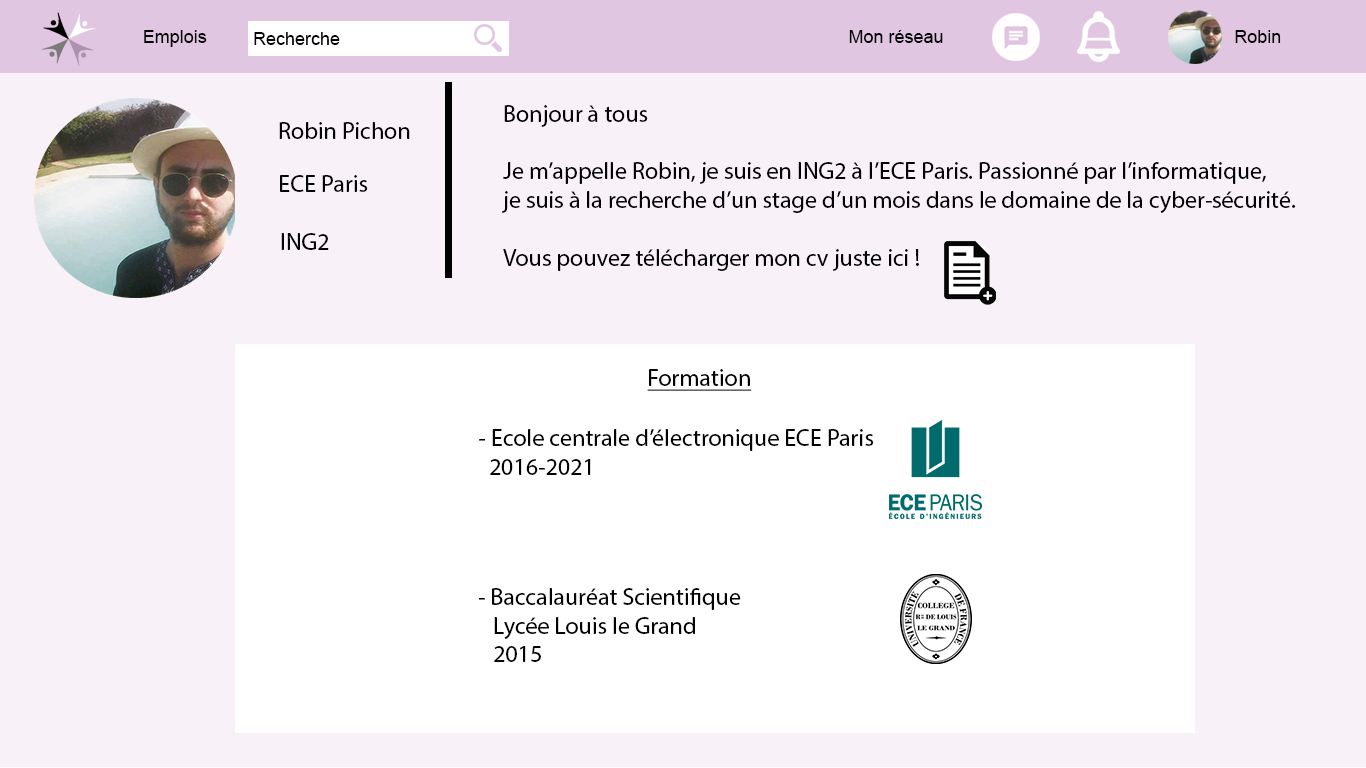
<style>
.page{position:relative;width:1366px;height:768px;background:#f8f2f8}
.page>*{position:absolute;margin:0}
.t1{font:18px "ArialMT";color:#000000}
.t2{font:24px "MyriadPro-Regular";color:#000000}
.t3{font:24px "MyriadPro-Regular";color:#000000;text-decoration:underline}
</style>
<div class="page">
<p class="t1" style="left:144px;top:30px;width:63px;height:17px">Emplois</p>
<p class="t1" style="left:849px;top:30px;width:94px;height:13px">Mon réseau</p>
<p class="t1" style="left:1235px;top:30px;width:46px;height:13px">Robin</p>
<p class="t1" style="left:254px;top:32px;width:86px;height:13px">Recherche</p>
<p class="t2" style="left:502px;top:105px;width:794px;height:166px">Bonjour à tous <br><br>Je m’appelle Robin, je suis en ING2 à l’ECE Paris. Passionné par l’informatique,<br>je suis à la recherche d’un stage d’un mois dans le domaine de la cyber-sécurité.<br><br>Vous pouvez télécharger mon cv juste ici !</p>
<p class="t2" style="left:279px;top:122px;width:131px;height:17px">Robin Pichon</p>
<p class="t2" style="left:280px;top:175px;width:88px;height:17px">ECE Paris</p>
<p class="t2" style="left:281px;top:233px;width:48px;height:17px">ING2</p>
<p class="t3" style="left:647px;top:369px;width:105px;height:22px">Formation</p>
<p class="t2" style="left:479px;top:429px;width:395px;height:46px">- Ecole centrale d’électronique ECE Paris<br>  2016-2021</p>
<p class="t2" style="left:478px;top:588px;width:263px;height:74px">- Baccalauréat Scientifique <br>   Lycée Louis le Grand <br>   2015</p>
</div>
